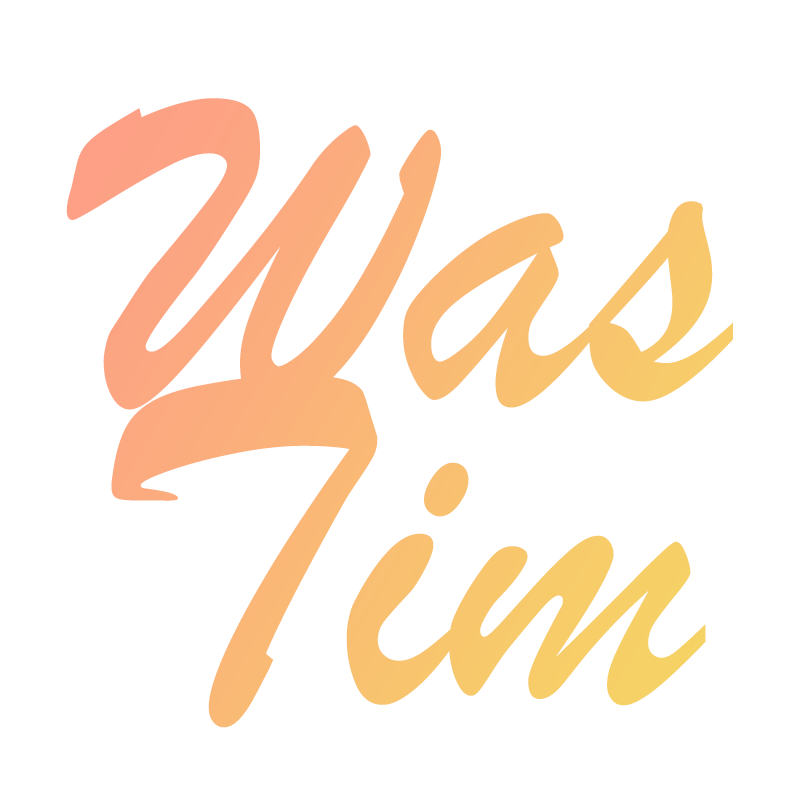
<style>
.page{position:relative;width:800px;height:800px;background:#ffffff}
.page>*{position:absolute;margin:0}
.t1{font:500px/302px "BrushScriptMT";color:#fab776;scale:0.91 1}
</style>
<div class="page">
<p class="t1" style="left:66px;top:98px;width:667px;height:630px">Was<br>Tim</p>
</div>
